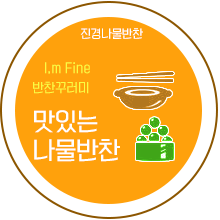
<style>
.page{position:relative;width:220px;height:220px;background:#ffa10c}
.page>*{position:absolute;margin:0}
.t1{font:11px "KoreanYNSJG3-R";color:#ffffff}
.t2{font:12px/19.8px "KoreanYNSJG3-R";color:#fafc42}
.t3{font:23px/28.6px "KoreanYNSJG3-R";color:#ffffff}
</style>
<div class="page">
<p class="t1" style="left:80px;top:28px;width:63px;height:11px">진경나물반찬</p>
<p class="t2" style="left:33px;top:62px;width:57px;height:32px">I,m Fine<br>반찬꾸러미</p>
<p class="t3" style="left:34px;top:110px;width:86px;height:52px">맛있는<br>나물반찬</p>
</div>
